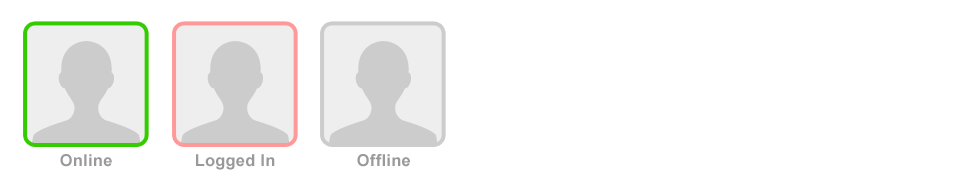
<style>
.page{position:relative;width:980px;height:175px;background:#ffffff}
.page>*{position:absolute;margin:0}
.t1{font:16.2px "Arial-BoldMT";letter-spacing:0.025em;color:#999999}
</style>
<div class="page">
<p class="t1" style="left:60px;top:154px;width:52px;height:13px">Online</p>
<p class="t1" style="left:196px;top:154px;width:79px;height:16px">Logged In</p>
<p class="t1" style="left:357px;top:154px;width:53px;height:13px">Offline</p>
</div>
